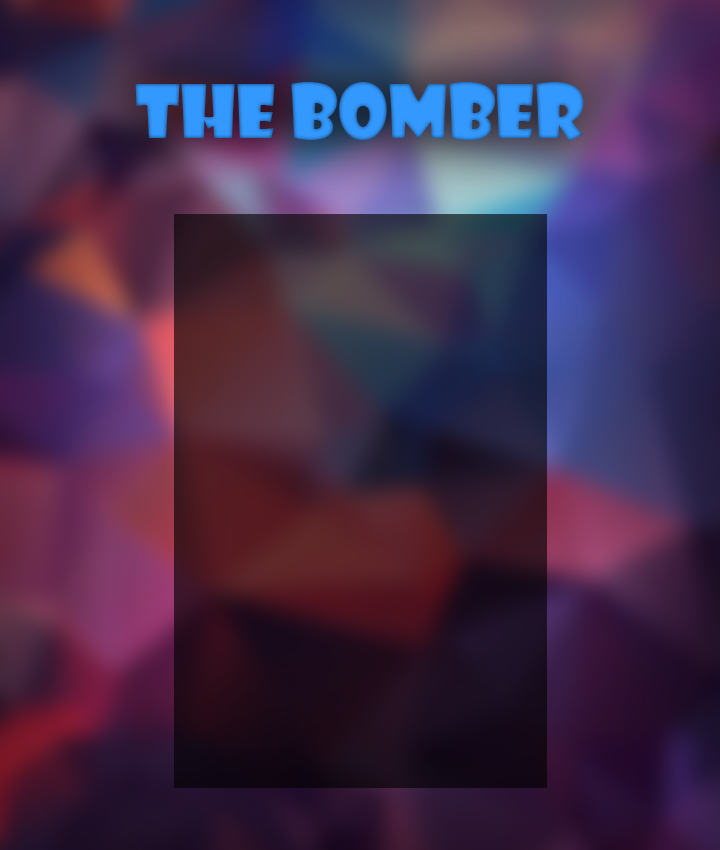
<style>
.page{position:relative;width:720px;height:850px}
.page>*{position:absolute;margin:0}
.t1{font:72px "ShowcardGothic-Reg";color:#3399ff}
</style>
<div class="page">
<p class="t1" style="left:135px;top:82px;width:449px;height:59px">THE BOMBER</p>
</div>
